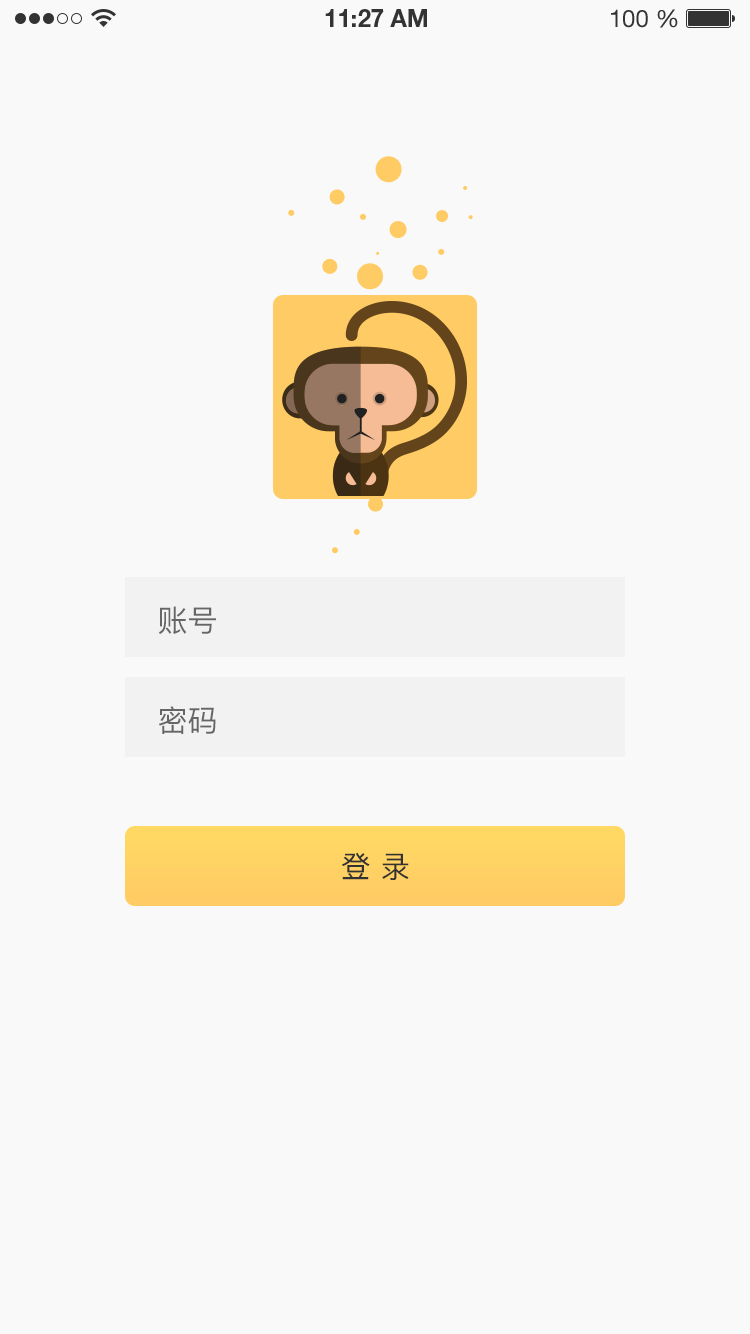
<style>
.page{position:relative;width:750px;height:1334px;background:#f9f9f9}
.page>*{position:absolute;margin:0}
.t1{font:30px "PingFang-SC-Medium";color:#666666;text-transform:uppercase}
.t2{font:30px "PingFang-SC-Medium";color:#333333;text-transform:uppercase}
</style>
<div class="page">
<p class="t1" style="left:159px;top:606px;width:57px;height:28px">账号</p>
<p class="t1" style="left:159px;top:706px;width:57px;height:28px">密码</p>
<p class="t2" style="left:342px;top:852px;width:67px;height:28px">登 录</p>
</div>
